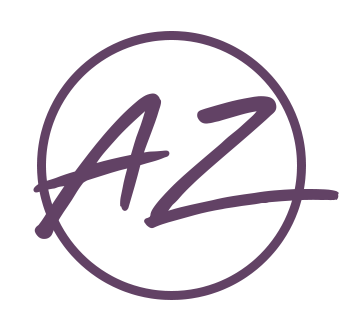
<style>
.page{position:relative;width:347px;height:336px;background:#ffffff}
.page>*{position:absolute;margin:0}
.t1{font:140px "HighTide";letter-spacing:0.08em;color:#624265;font-weight:bold}
</style>
<div class="page">
<p class="t1" style="left:33px;top:93px;width:306px;height:146px">AZ</p>
</div>
